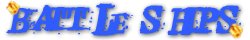
<style>
.page{position:relative;width:250px;height:40px;background:#2f5bff}
.page>*{position:absolute;margin:0}
.t1{font:34px "ArcadeFire";letter-spacing:-0.05em;color:#2f5bff;font-weight:bold;font-style:italic}
</style>
<div class="page">
<p class="t1" style="left:6px;top:3px;width:235px;height:33px">BATTLE SHIPS</p>
</div>
